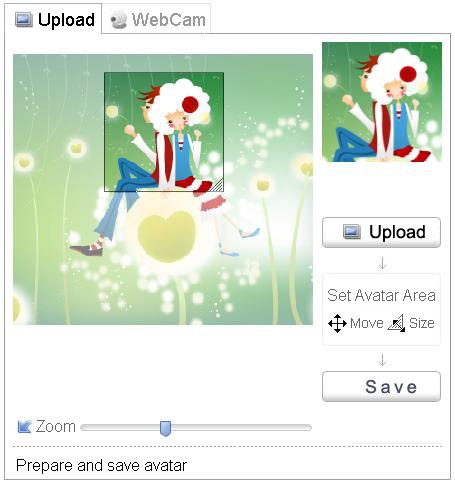
<style>
.page{position:relative;width:455px;height:481px;background:#ffffff}
.page>*{position:absolute;margin:0}
.t1{font:18px "ArialMT";color:#000000}
.t2{font:18px "ArialMT";color:#999999}
.t3{font:16px "ArialMT";color:#666666}
.t4{font:14px "ArialMT";color:#666666}
.t5{font:18px "ArialMT";letter-spacing:0.2em;color:#484866}
.t6{font:16px "ArialMT";color:#000000}
</style>
<div class="page">
<p class="t1" style="left:38px;top:11px;width:57px;height:21px">Upload</p>
<p class="t2" style="left:132px;top:11px;width:74px;height:21px">WebCam</p>
<p class="t1" style="left:369px;top:223px;width:57px;height:21px">Upload</p>
<p class="t3" style="left:327px;top:287px;width:109px;height:19px">Set Avatar Area</p>
<p class="t4" style="left:350px;top:316px;width:34px;height:17px">Move</p>
<p class="t4" style="left:409px;top:316px;width:26px;height:17px">Size</p>
<p class="t5" style="left:365px;top:378px;width:55px;height:21px">Save</p>
<p class="t3" style="left:36px;top:418px;width:40px;height:19px">Zoom</p>
<p class="t6" style="left:16px;top:457px;width:172px;height:19px">Prepare and save avatar</p>
</div>
